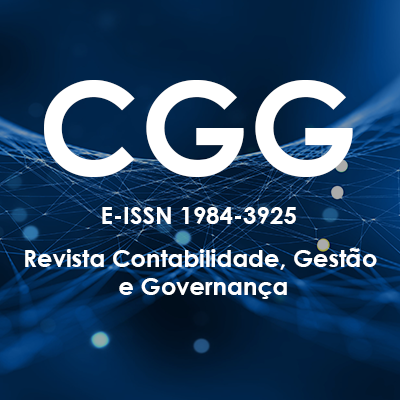
<style>
.page{position:relative;width:400px;height:400px}
.page>*{position:absolute;margin:0}
.t1{font:130px "CenturyGothic-Bold";color:#ffffff}
.t2{font:24px "CenturyGothic-Bold";color:#ffffff}
</style>
<div class="page">
<p class="t1" style="left:44px;top:80px;width:309px;height:97px">CGG</p>
<p class="t2" style="left:102px;top:207px;width:194px;height:17px">E-ISSN 1984-3925</p>
<p class="t2" style="left:25px;top:248px;width:352px;height:51px;text-align:center">Revista Contabilidade, Gestão <br>e Governança</p>
</div>
